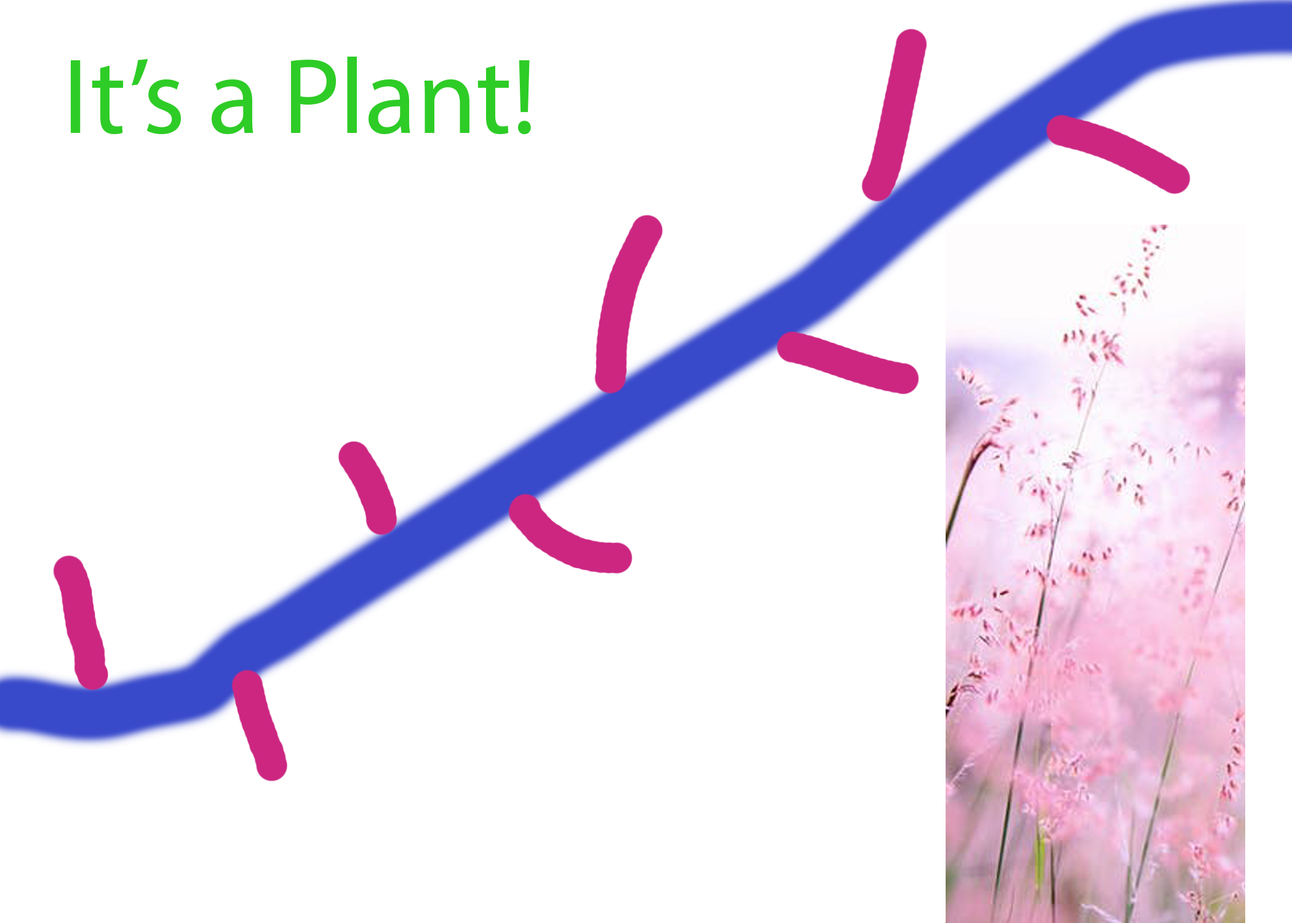
<style>
.page{position:relative;width:1292px;height:923px;background:#ffffff}
.page>*{position:absolute;margin:0}
.t1{font:107.7px "MyriadPro-Regular";color:#2ecc26}
</style>
<div class="page">
<p class="t1" style="left:71px;top:57px;width:460px;height:78px">It’s a Plant!</p>
</div>
